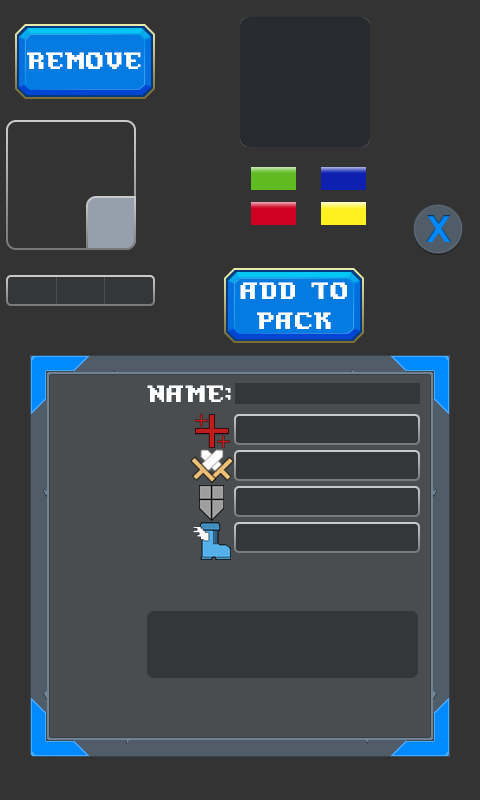
<style>
.page{position:relative;width:480px;height:800px;background:#333333}
.page>*{position:absolute;margin:0}
.t1{font:24px "PixelAzureBonds";color:#ffffff;text-transform:uppercase}
.t2{font:24px/30px "PixelAzureBonds";color:#ffffff;text-transform:uppercase}
</style>
<div class="page">
<p class="t1" style="left:27px;top:52px;width:114px;height:17px">REmove</p>
<p class="t2" style="left:240px;top:282px;width:107px;height:47px;text-align:center">ADD TO<br>Pack</p>
<p class="t1" style="left:147px;top:385px;width:84px;height:17px">NAme:</p>
</div>
